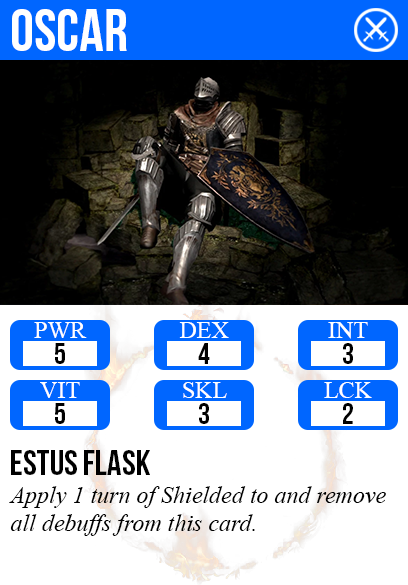
<style>
.page{position:relative;width:408px;height:585px;background:#ffffff}
.page>*{position:absolute;margin:0}
.t1{font:60px "BebasNeue";color:#ffffff}
.t2{font:24px "TimesNewRomanPSMT";color:#ffffff}
.t3{font:30px "BebasNeue";color:#000000}
.t4{font:36px "BebasNeue";color:#000000}
.t5{font:24px "TimesNewRomanPS-ItalicMT";color:#000000}
</style>
<div class="page">
<p class="t1" style="left:12px;top:9px;width:115px;height:42px">oscar</p>
<p class="t2" style="left:34px;top:322px;width:53px;height:16px">PWR</p>
<p class="t2" style="left:179px;top:322px;width:50px;height:16px">DEX</p>
<p class="t2" style="left:328px;top:322px;width:40px;height:17px">INT</p>
<p class="t3" style="left:55px;top:343px;width:10px;height:21px">5</p>
<p class="t3" style="left:198px;top:343px;width:12px;height:21px">4</p>
<p class="t3" style="left:343px;top:343px;width:10px;height:21px">3</p>
<p class="t2" style="left:40px;top:382px;width:40px;height:16px">VIT</p>
<p class="t2" style="left:183px;top:382px;width:44px;height:16px">SKL</p>
<p class="t2" style="left:324px;top:382px;width:48px;height:16px">LCK</p>
<p class="t3" style="left:55px;top:403px;width:10px;height:21px">5</p>
<p class="t3" style="left:199px;top:403px;width:10px;height:21px">3</p>
<p class="t3" style="left:343px;top:403px;width:10px;height:21px">2</p>
<p class="t4" style="left:11px;top:450px;width:139px;height:25px">estus flask</p>
<p class="t5" style="left:9px;top:486px;width:377px;height:50px">Apply 1 turn of Shielded to and remove<br>all debuffs from this card.</p>
</div>
